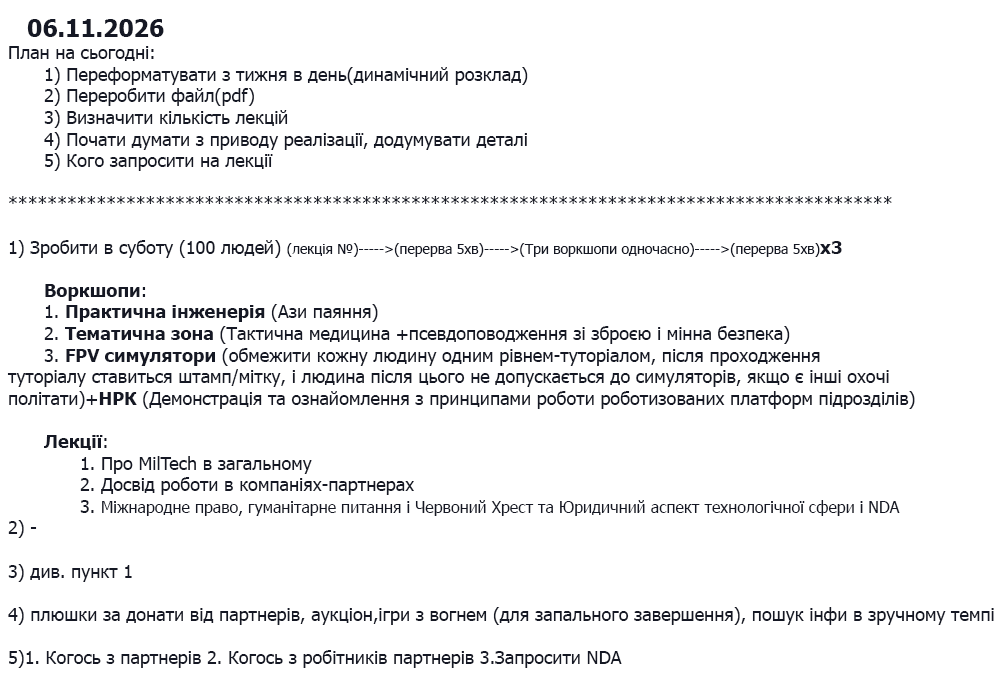
<style>
.page{position:relative;width:1000px;height:700px;background:#ffffff}
.page>*{position:absolute;margin:0}
.t1{font:24px "Tahoma-Bold";color:#151824}
.t2{font:18px "Tahoma";color:#151824}
.t3{font:14px "Tahoma";color:#151824}
.t4{font:18px "Tahoma-Bold";color:#151824}
.t5{font:16px "Tahoma";color:#151824}
</style>
<div class="page">
<p class="t1" style="left:27px;top:19px;width:137px;height:18px">06.11.2026</p>
<p class="t2" style="left:7px;top:46px;width:987px;height:622px">План на сьогодні:<br> 1) Переформатувати з тижня в день(динамічний розклад)<br> 2) Переробити файл(pdf)<br> 3) Визначити кількість лекцій<br> 4) Почати думати з приводу реалізації, додумувати деталі<br> 5) Кого запросити на лекції<br><br>******************************************************************************************<br><br>1) Зробити в суботу (100 людей) <span class="t3">(лекція №)-----&gt;(перерва 5хв)-----&gt;(Три воркшопи одночасно)-----&gt;(перерва 5хв)</span><span class="t4">x3<br><br> Воркшопи</span>:<br> 1. <span class="t4">Практична інженерія</span> (Ази паяння)<br> 2. <span class="t4">Тематична зона</span> (Тактична медицина +псевдоповодження зі зброєю і мінна безпека) <br> 3. <span class="t4">FPV симулятори</span> (обмежити кожну людину одним рівнем-туторіалом, після проходження                                  туторіалу ставиться штамп/мітку, і людина після цього не допускається до симуляторів, якщо є інші охочі         політати)+<span class="t4">НРК</span> (Демонстрація та ознайомлення з принципами роботи роботизованих платформ підрозділів)<br> <br> <span class="t4">Лекції</span>:<br>  1. Про MilTech в загальному<br>  2. Досвід роботи в компаніях-партнерах<br>  3. <span class="t5">Міжнародне право, гуманітарне питання і Червоний Хрест та Юридичний аспект технологічної сфери і NDA<br></span>2) -<br><br>3) див. пункт 1<br><br>4) плюшки за донати від партнерів, аукціон,ігри з вогнем (для запального завершення), пошук інфи в зручному темпі<br><br>5)1. Когось з партнерів 2. Когось з робітників партнерів 3.Запросити NDA</p>
</div>
